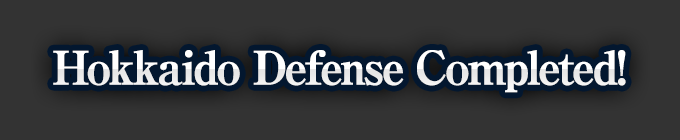
<style>
.page{position:relative;width:680px;height:140px;background:#333333}
.page>*{position:absolute;margin:0}
.t1{font:46px "RyuminPro-ExBold";letter-spacing:-0.08em;color:#ffffff;font-weight:bold}
</style>
<div class="page">
<p class="t1" style="left:53px;top:50px;width:573px;height:43px">Hokkaido Defense Completed!</p>
</div>
